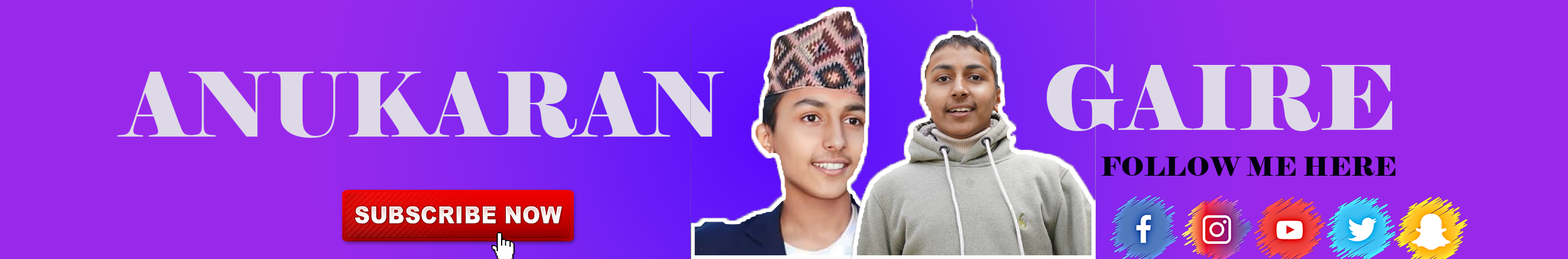
<style>
.page{position:relative;width:1568px;height:259px;background:#9929ea}
.page>*{position:absolute;margin:0}
.t1{font:153.1px "Elephant-Regular";color:#ded9e6;text-transform:uppercase}
.t2{font:44.1px "Elephant-Regular";color:#00000f;text-transform:uppercase}
</style>
<div class="page">
<p class="t1" style="left:1047px;top:64px;width:345px;height:67px">GAIRE</p>
<p class="t1" style="left:117px;top:71px;width:607px;height:67px">ANUKARAN</p>
<p class="t2" style="left:1101px;top:157px;width:295px;height:19px">FOLLOW ME HERE</p>
</div>
